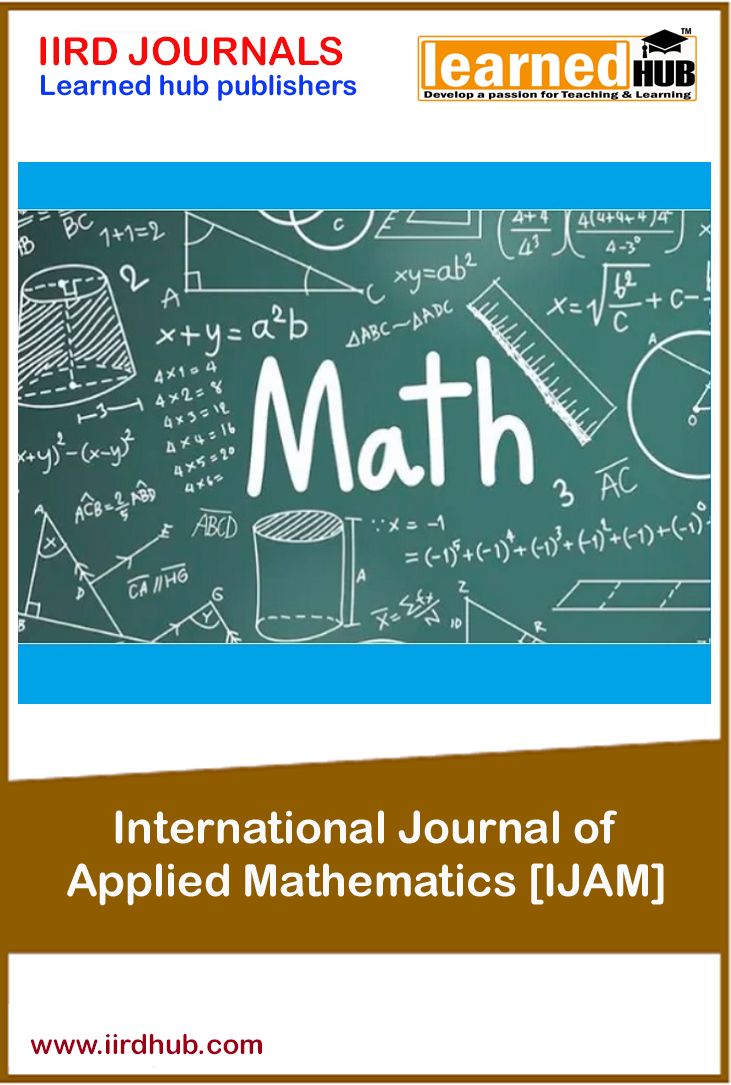
<style>
.page{position:relative;width:731px;height:1085px;background:#ffffff}
.page>*{position:absolute;margin:0}
.t1{font:38.9px "ArialRoundedMTBold";color:#f60b0b}
.t2{font:27.8px "ArialRoundedMTBold";color:#0b37f6}
.t3{font:44.4px "ArialRoundedMTBold";color:#fafafc}
.t4{font:27.8px "ArialRoundedMTBold";color:#990016}
</style>
<div class="page">
<p class="t1" style="left:40px;top:36px;width:303px;height:30px">IIRD JOURNALS</p>
<p class="t2" style="left:41px;top:74px;width:316px;height:27px">Learned hub publishers</p>
<p class="t3" style="left:67px;top:810px;width:597px;height:96px;text-align:center">International Journal of <br>Applied Mathematics [IJAM]</p>
<p class="t4" style="left:30px;top:1033px;width:232px;height:22px">www.iirdhub.com</p>
</div>
